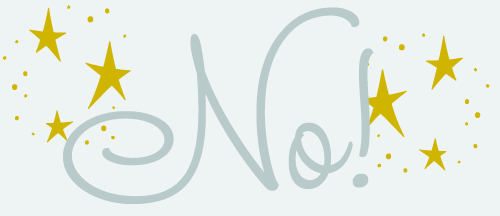
<style>
.page{position:relative;width:500px;height:216px;background:#eef3f3}
.page>*{position:absolute;margin:0}
.t1{font:144px "StudioLettering-Shapes";color:#d0b500}
.t2{font:144px "StudioLettering-Swing";color:#b9cacb}
</style>
<div class="page">
<p class="t1" style="left:3px;top:5px;width:128px;height:140px;rotate:180deg">'</p>
<p class="t2" style="left:63px;top:7px;width:311px;height:197px">No!</p>
<p class="t1" style="left:361px;top:33px;width:129px;height:140px">'</p>
</div>
